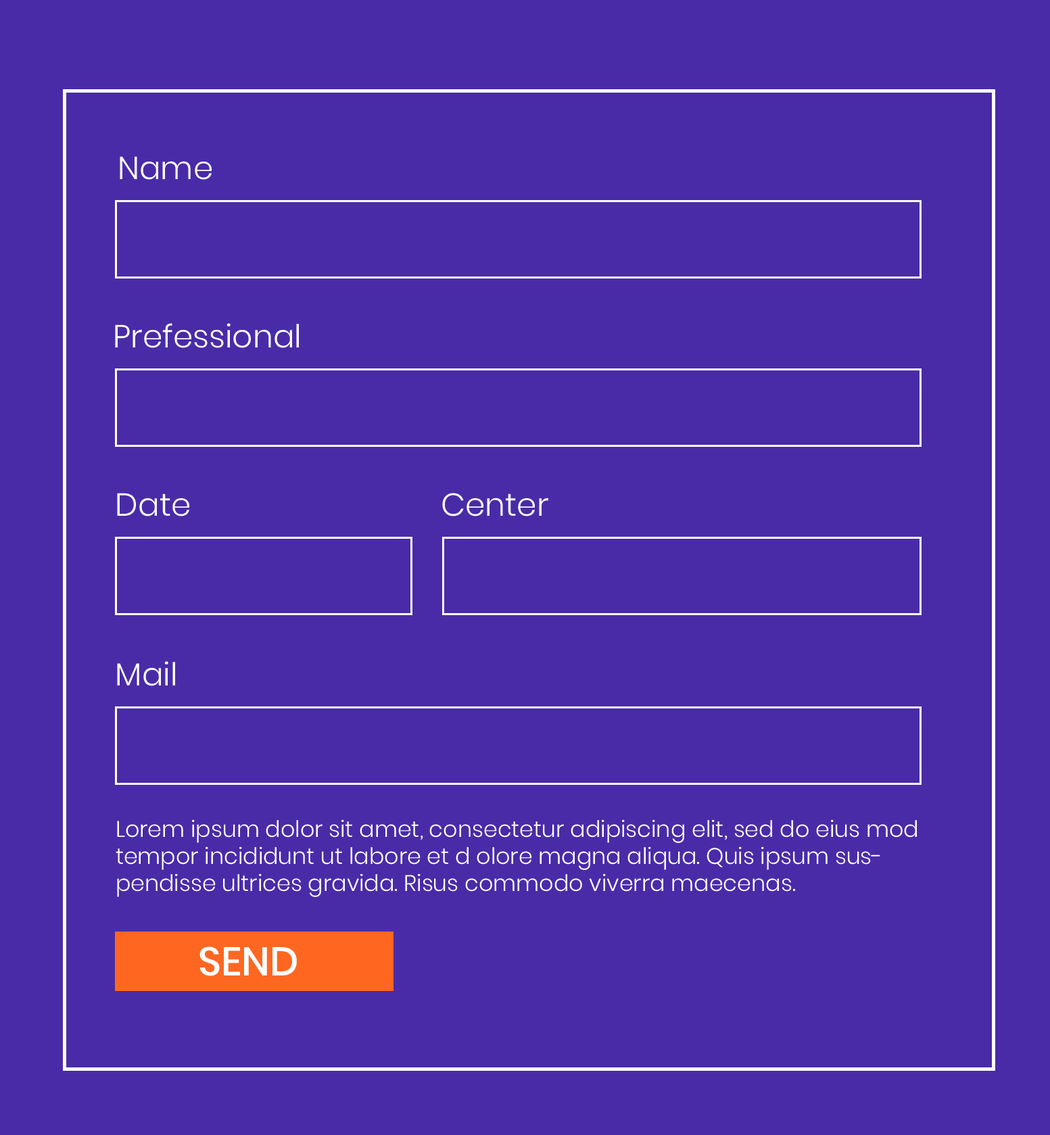
<style>
.page{position:relative;width:1050px;height:1135px;background:#492ba7}
.page>*{position:absolute;margin:0}
.t1{font:31.8px "Poppins-Light";color:#ffffff}
.t2{font:22.5px "Poppins-Light";color:#ffffff}
.t3{font:40.1px "Poppins-Medium";color:#ffffff}
</style>
<div class="page">
<p class="t1" style="left:120px;top:156px;width:92px;height:24px">Name</p>
<p class="t1" style="left:115px;top:323px;width:184px;height:25px">Prefessional</p>
<p class="t1" style="left:117px;top:493px;width:72px;height:24px">Date</p>
<p class="t1" style="left:442px;top:493px;width:106px;height:24px">Center</p>
<p class="t1" style="left:117px;top:661px;width:58px;height:25px">Mail</p>
<p class="t2" style="left:116px;top:820px;width:801px;height:77px">Lorem ipsum dolor sit amet, consectetur adipiscing elit, sed do eius mod tempor incididunt ut labore et d olore magna aliqua. Quis ipsum suspendisse ultrices gravida. Risus commodo viverra maecenas.</p>
<p class="t3" style="left:199px;top:947px;width:98px;height:30px">SEND</p>
</div>
